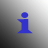
<style>
.page{position:relative;width:48px;height:48px}
.page>*{position:absolute;margin:0}
.t1{font:30px "LatinWide";color:#3333cc;scale:0.8 1}
</style>
<div class="page">
<p class="t1" style="left:17px;top:12px;width:16px;height:22px">i</p>
</div>
